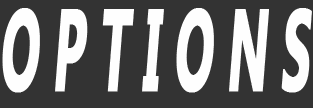
<style>
.page{position:relative;width:313px;height:108px;background:#333333}
.page>*{position:absolute;margin:0}
.t1{font:114.5px "MicrosoftTaiLe-Bold";letter-spacing:0.26em;color:#fefefe;font-weight:bold;font-style:italic;scale:0.44 1}
</style>
<div class="page">
<p class="t1" style="left:2px;top:8px;width:310px;height:85px">OPTIONS</p>
</div>
